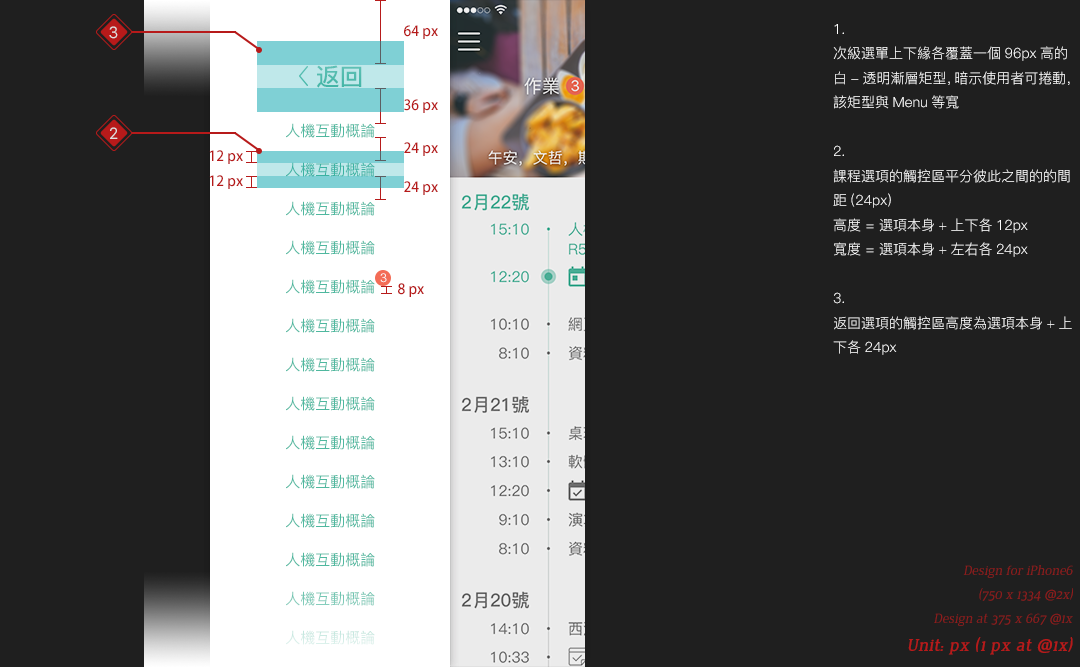
<style>
.page{position:relative;width:1080px;height:667px;background:#1f1f1f}
.page>*{position:absolute;margin:0}
.t1{font:16px "SFUIDisplay-Regular";color:#e0e0e0}
.t2{font:14px "AdobeFanHeitiStd-Bold";color:#b71a1a}
.t3{font:14px "PingFang-SC-Regular";color:#ffffff}
.t4{font:24px "PingFang-SC-Bold";color:#4fb89f}
.t5{font:15px "PingFang-SC-Medium";color:#4fb89f}
.t6{font:12px "SFUIDisplay-Regular";color:#fafafa}
.t7{font:14px "Jura-Italic";color:#8e1c1c}
.t8{font:15px "PingFang-SC-Medium";color:#79c9b6}
.t9{font:15px "PingFang-SC-Medium";color:#cfece5}
.t10{font:18px "Jura-BoldItalic";color:#b71a1a}
</style>
<div class="page">
<p class="t1" style="left:109px;top:26px;width:9px;height:13px">3</p>
<p class="t2" style="left:404px;top:25px;width:34px;height:14px">64 px</p>
<p class="t3" style="left:833px;top:24px;width:239px;height:331px">1. <br>次級選單上下緣各覆蓋一個96px高的白-透明漸層矩型，暗示使用者可捲動，該矩型與Menu等寬<br><br>2.<br>課程選項的觸控區平分彼此之間的的間距(24px)<br>高度 = 選項本身+上下各12px<br>寬度 = 選項本身+左右各24px<br><br>3.<br>返回選項的觸控區高度為選項本身+上下各24px</p>
<p class="t4" style="left:317px;top:65px;width:45px;height:23px">返回</p>
<p class="t2" style="left:404px;top:99px;width:34px;height:14px">36 px</p>
<p class="t5" style="left:286px;top:123px;width:89px;height:15px">人機互動概論</p>
<p class="t1" style="left:110px;top:127px;width:8px;height:12px">2</p>
<p class="t2" style="left:209px;top:150px;width:34px;height:14px">12 px</p>
<p class="t2" style="left:404px;top:142px;width:34px;height:14px">24 px</p>
<p class="t5" style="left:286px;top:162px;width:89px;height:15px">人機互動概論</p>
<p class="t2" style="left:209px;top:175px;width:34px;height:14px">12 px</p>
<p class="t2" style="left:404px;top:181px;width:34px;height:14px">24 px</p>
<p class="t5" style="left:286px;top:201px;width:89px;height:15px">人機互動概論</p>
<p class="t5" style="left:286px;top:240px;width:89px;height:15px">人機互動概論</p>
<p class="t5" style="left:286px;top:279px;width:89px;height:15px">人機互動概論</p>
<p class="t6" style="left:380px;top:273px;width:7px;height:10px">3</p>
<p class="t2" style="left:398px;top:283px;width:26px;height:14px">8 px</p>
<p class="t5" style="left:286px;top:318px;width:89px;height:15px">人機互動概論</p>
<p class="t5" style="left:286px;top:357px;width:89px;height:15px">人機互動概論</p>
<p class="t5" style="left:286px;top:396px;width:89px;height:15px">人機互動概論</p>
<p class="t5" style="left:286px;top:435px;width:89px;height:15px">人機互動概論</p>
<p class="t5" style="left:286px;top:474px;width:89px;height:15px">人機互動概論</p>
<p class="t5" style="left:286px;top:513px;width:89px;height:15px">人機互動概論</p>
<p class="t5" style="left:286px;top:552px;width:89px;height:15px">人機互動概論</p>
<p class="t7" style="left:963px;top:565px;width:110px;height:36px;text-align:right">Design for iPhone6<br>(750 x 1334 @2x)</p>
<p class="t8" style="left:286px;top:591px;width:89px;height:15px">人機互動概論</p>
<p class="t7" style="left:934px;top:613px;width:139px;height:13px">Design at 375 x 667 @1x</p>
<p class="t9" style="left:286px;top:630px;width:89px;height:15px">人機互動概論</p>
<p class="t10" style="left:908px;top:637px;width:165px;height:18px">Unit: px (1 px at @1x)</p>
</div>
